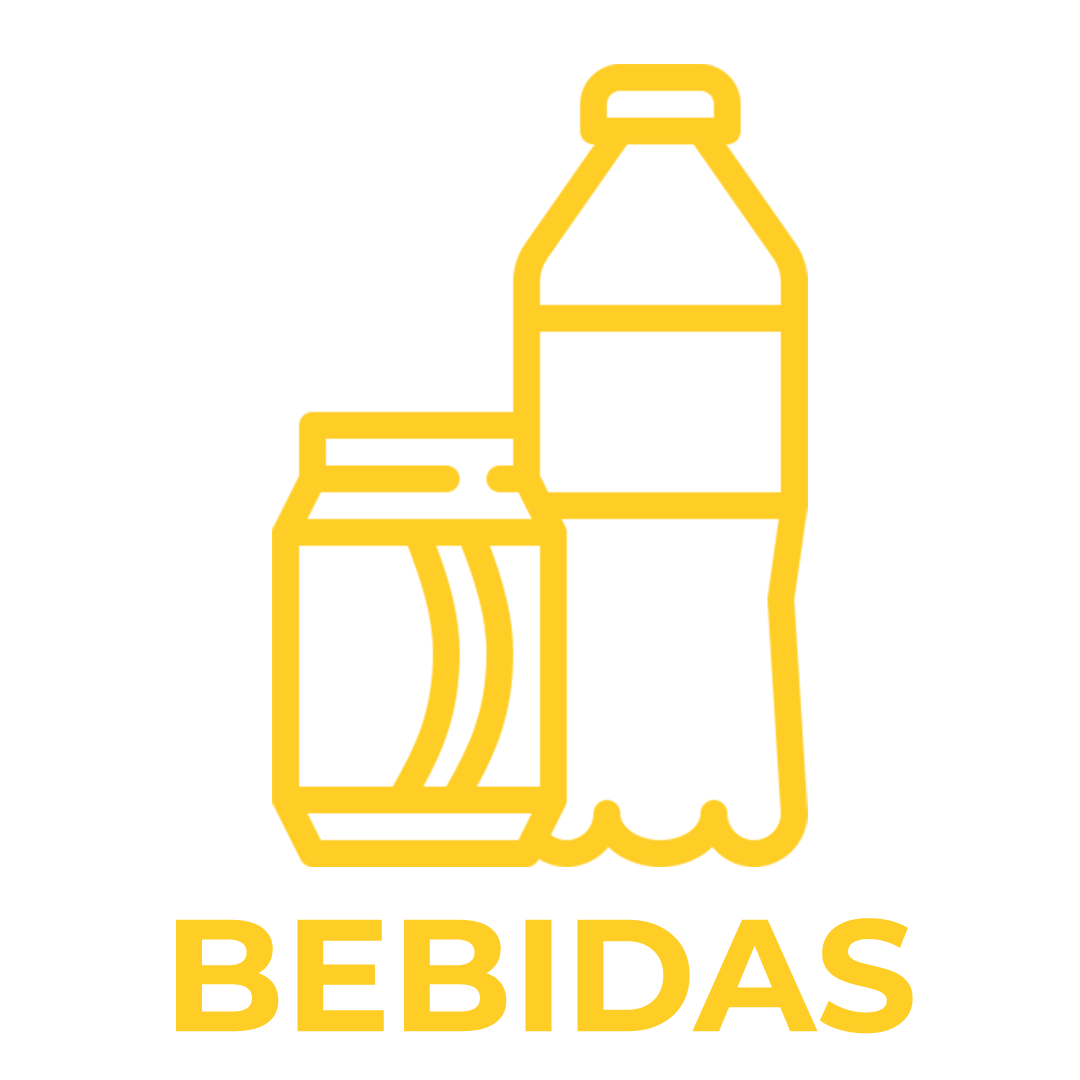
<style>
.page{position:relative;width:1080px;height:1080px;background:#ffffff}
.page>*{position:absolute;margin:0}
.t1{font:158.8px "Montserrat-Bold";color:#fece26;text-transform:uppercase}
</style>
<div class="page">
<p class="t1" style="left:176px;top:918px;width:737px;height:116px">Bebidas</p>
</div>
